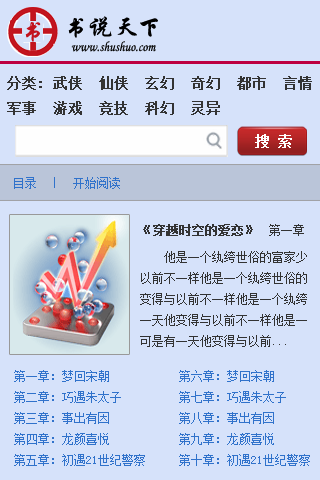
<style>
.page{position:relative;width:320px;height:480px;background:#d6e2fa}
.page>*{position:absolute;margin:0}
.t1{font:24px "STXingkai";letter-spacing:0.025em;color:#090909}
.t2{font:14px "STLiti";color:#090909;scale:0.9 1}
.t3{font:14px "SimSun";color:#ffffff;font-weight:bold}
.t4{font:12px "SimSun";color:#3072cb}
.t5{font:12px "SimSun";color:#333333;font-weight:bold}
.t6{font:12px "SimSun";color:#333333}
</style>
<div class="page">
<p class="t1" style="left:68px;top:16px;width:90px;height:22px">书说天下</p>
<p class="t2" style="left:71px;top:41px;width:85px;height:11px">www.shushuo.com</p>
<p class="t3" style="left:255px;top:134px;width:37px;height:14px">搜 索</p>
<p class="t4" style="left:14px;top:177px;width:106px;height:12px">目录　｜　开始阅读</p>
<p class="t5" style="left:143px;top:224px;width:161px;height:12px">《穿越时空的爱恋》<span class="t6">　第一章</span></p>
<p class="t6" style="left:140px;top:251px;width:167px;height:96px">他是一个纨绔世俗的富家少<br>以前不一样他是一个纨绔世俗的<br>变得与以前不一样他是一个纨绔<br>一天他变得与以前不一样他是一<br>可是有一天他变得与以前...</p>
<p class="t4" style="left:14px;top:370px;width:131px;height:96px">第一章：梦回宋朝<br>第二章：巧遇朱太子<br>第三章：事出有因<br>第四章：龙颜喜悦<br>第五章：初遇21世纪警察</p>
<p class="t4" style="left:179px;top:370px;width:131px;height:96px">第六章：梦回宋朝<br>第七章：巧遇朱太子<br>第八章：事出有因<br>第九章：龙颜喜悦<br>第十章：初遇21世纪警察</p>
</div>
